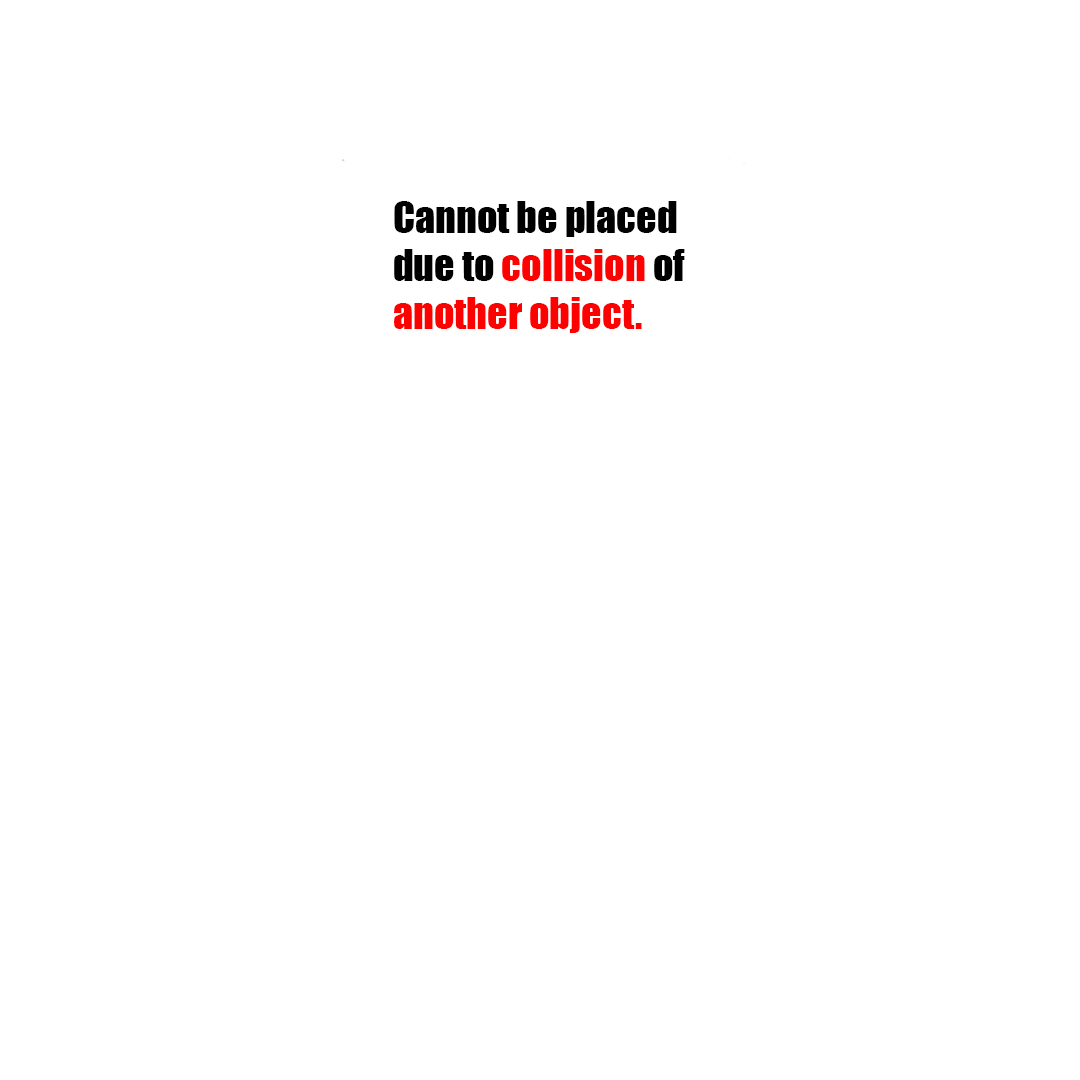
<style>
.page{position:relative;width:1080px;height:1080px;background:#ffffff}
.page>*{position:absolute;margin:0}
.t1{font:40px "Impact";color:#000000}
.t2{font:40px "Impact";color:#ff0000}
</style>
<div class="page">
<p class="t1" style="left:394px;top:201px;width:291px;height:132px">Cannot be placed <br>due to <span class="t2">collision</span> of <br><span class="t2">another object.</span></p>
</div>
